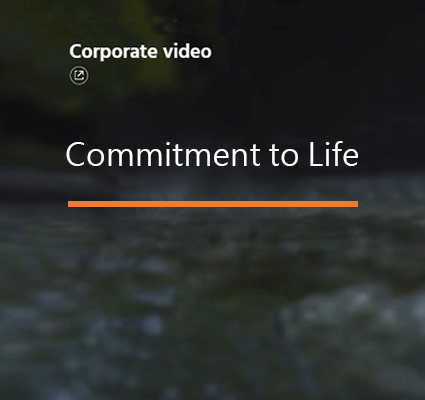
<style>
.page{position:relative;width:425px;height:400px}
.page>*{position:absolute;margin:0}
.t1{font:31.4px "MicrosoftJhengHeiRegular";color:#ffffff}
</style>
<div class="page">
<p class="t1" style="left:66px;top:141px;width:292px;height:25px">Commitment to Life</p>
</div>
